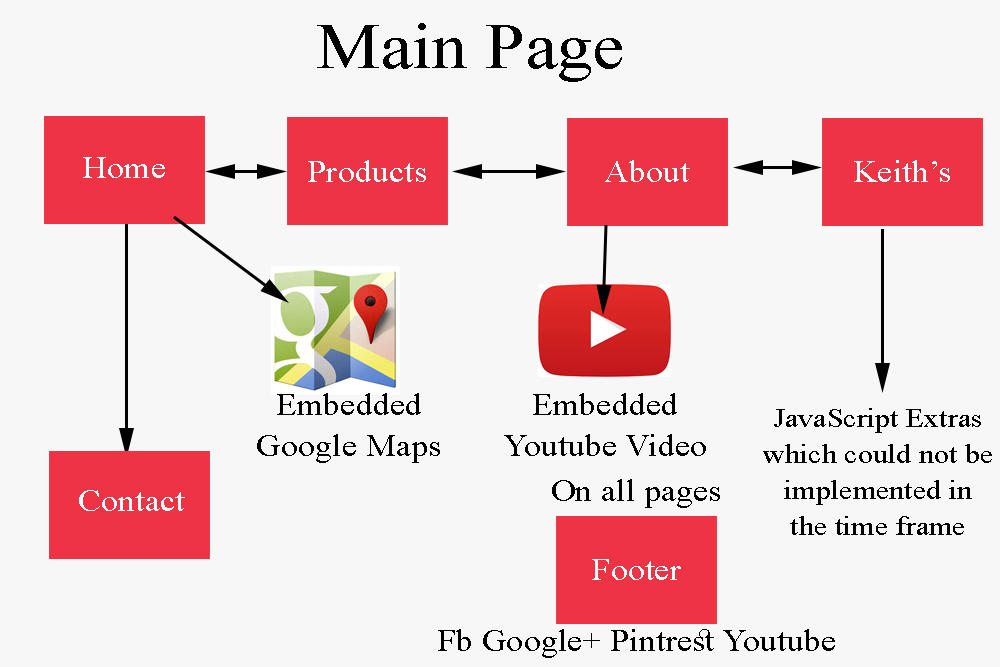
<style>
.page{position:relative;width:1000px;height:667px;background:#f7f7f8}
.page>*{position:absolute;margin:0}
.t1{font:65.3px "TimesNewRomanPSMT";color:#000000;scale:1.1 1}
.t2{font:31.2px "TimesNewRomanPSMT";color:#ffffff;scale:1.1 1}
.t3{font:31.2px "TimesNewRomanPSMT";color:#000000;scale:1.1 1}
.t4{font:27.4px "TimesNewRomanPSMT";color:#000000;scale:1.1 1}
</style>
<div class="page">
<p class="t1" style="left:317px;top:23px;width:305px;height:59px">Main Page</p>
<p class="t2" style="left:83px;top:157px;width:82px;height:21px">Home</p>
<p class="t2" style="left:308px;top:160px;width:118px;height:22px">Products</p>
<p class="t2" style="left:605px;top:160px;width:85px;height:22px">About</p>
<p class="t2" style="left:854px;top:160px;width:96px;height:22px">Keith’s</p>
<p class="t3" style="left:257px;top:393px;width:183px;height:70px;text-align:center">Embedded Google Maps</p>
<p class="t3" style="left:504px;top:393px;width:202px;height:63px;text-align:center">Embedded Youtube Video</p>
<p class="t4" style="left:763px;top:408px;width:229px;height:127px;text-align:center">JavaScript Extras which could not be implemented in the time frame</p>
<p class="t3" style="left:552px;top:479px;width:168px;height:29px">On all pages</p>
<p class="t2" style="left:79px;top:490px;width:106px;height:21px">Contact</p>
<p class="t2" style="left:592px;top:559px;width:89px;height:21px">Footer</p>
<p class="t3" style="left:438px;top:629px;width:397px;height:29px">Fb Google+ Pintrest Youtube</p>
</div>
